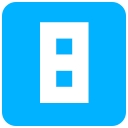
<style>
.page{position:relative;width:128px;height:128px;background:#00b2ff}
.page>*{position:absolute;margin:0}
.t1{font:113px "PixelatedMono";color:#ffffff}
</style>
<div class="page">
<p class="t1" style="left:40px;top:22px;width:49px;height:81px">8</p>
</div>
